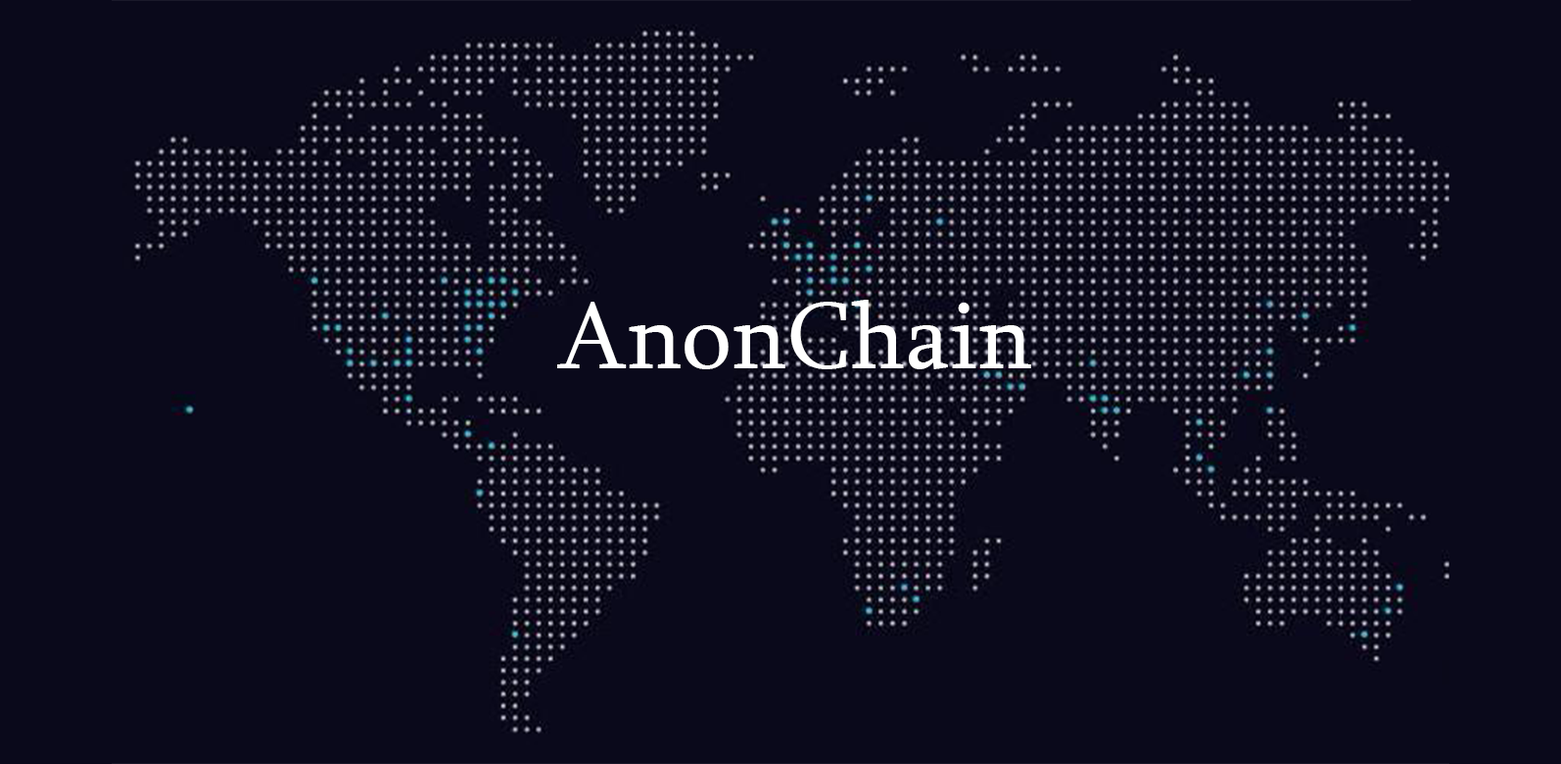
<style>
.page{position:relative;width:1561px;height:764px;background:#0a091b}
.page>*{position:absolute;margin:0}
.t1{font:97.9px "Sylfaen";color:#ffffff}
</style>
<div class="page">
<p class="t1" style="left:557px;top:300px;width:474px;height:69px">AnonChain</p>
</div>
